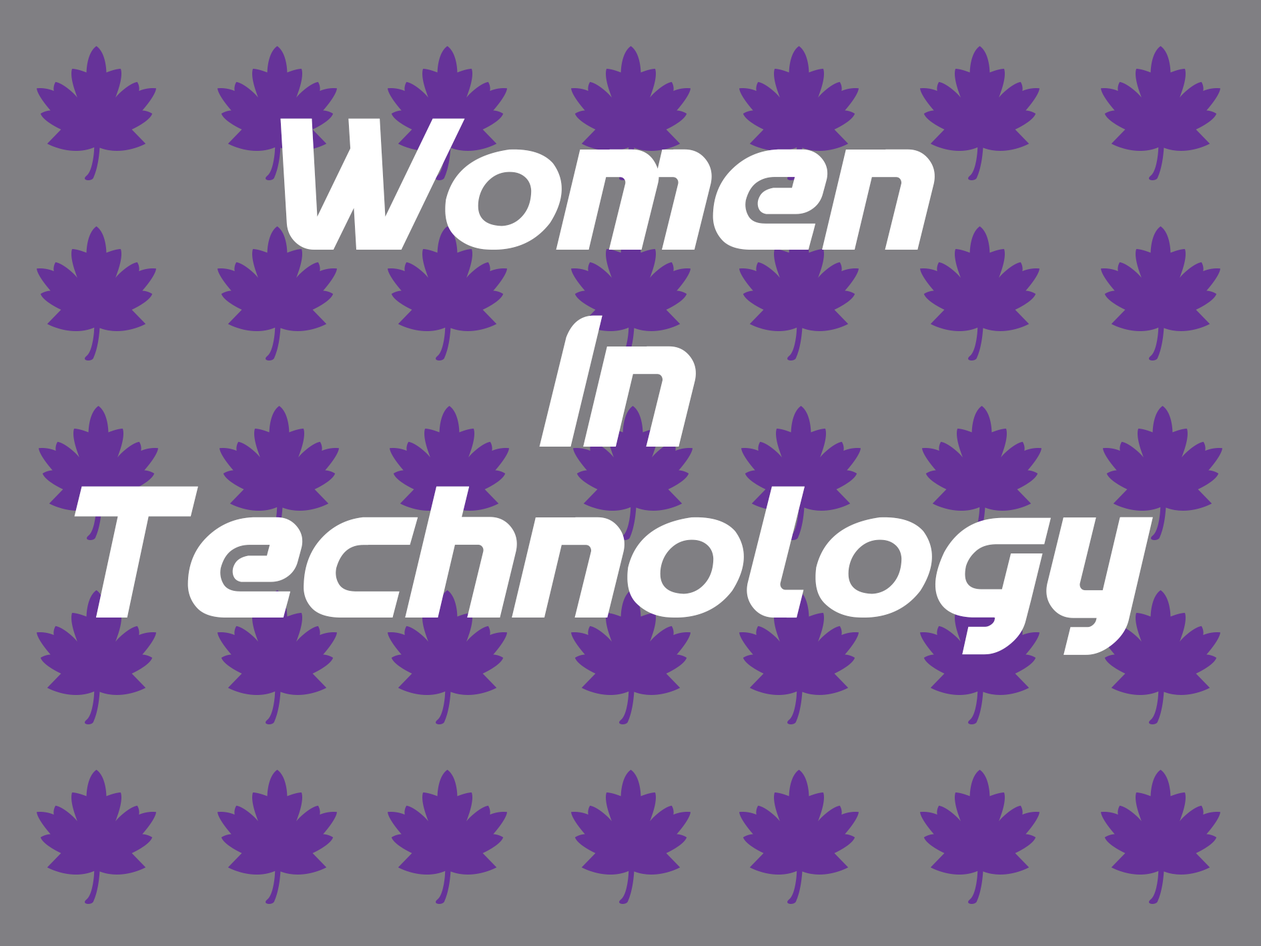
<style>
.page{position:relative;width:1261px;height:946px;background:#807f83}
.page>*{position:absolute;margin:0}
.t1{font:200.2px "Spantaran";color:#ffffff}
.t2{font:166.8px "Spantaran";color:#ffffff}
</style>
<div class="page">
<p class="t1" style="left:280px;top:118px;width:655px;height:132px">Women</p>
<p class="t1" style="left:539px;top:315px;width:157px;height:131px"><span class="t2"> </span>In</p>
<p class="t1" style="left:74px;top:486px;width:1079px;height:169px">Technology</p>
</div>
